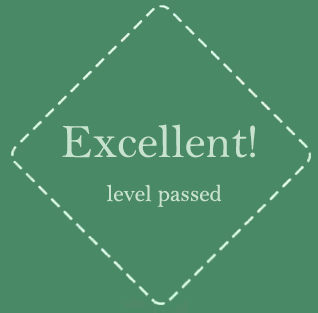
<style>
.page{position:relative;width:318px;height:313px;background:#4a8965}
.page>*{position:absolute;margin:0}
.t1{font:48px "BellMT";color:#c7e3cf}
.t2{font:24px "BellMT";color:#c7e3cf}
</style>
<div class="page">
<p class="t1" style="left:62px;top:124px;width:193px;height:34px">Excellent!</p>
<p class="t2" style="left:106px;top:184px;width:116px;height:23px">level passed</p>
</div>
